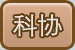
<style>
.page{position:relative;width:75px;height:50px}
.page>*{position:absolute;margin:0}
.t1{font:24.1px "STHeitiSC-Light";color:#efe2d9;scale:1.03 1}
</style>
<div class="page">
<p class="t1" style="left:13px;top:14px;width:49px;height:23px">科协</p>
</div>
